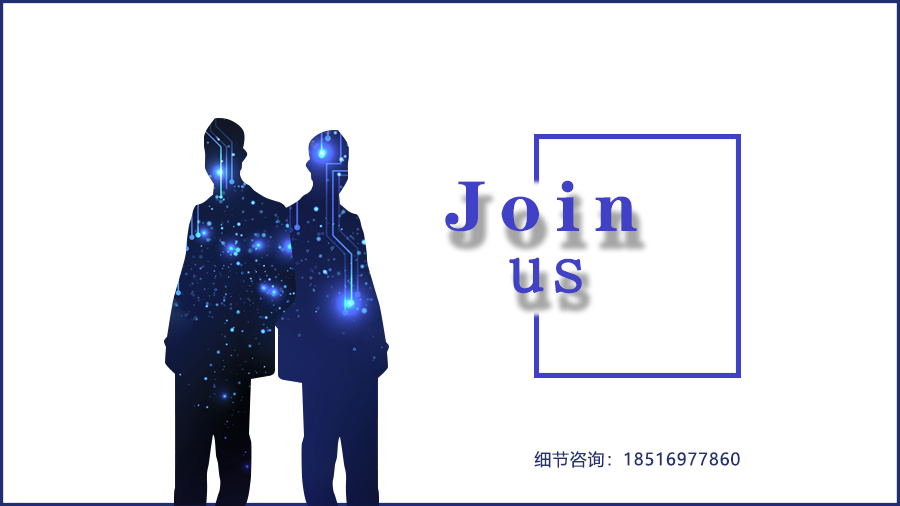
<style>
.page{position:relative;width:900px;height:506px;background:#ffffff}
.page>*{position:absolute;margin:0}
.t1{font:72px "FZCHYJW--GB1-0";letter-spacing:0.2em;color:#4141c8}
.t2{font:72px "SimSun-ExtB";letter-spacing:0.05em;color:#4141c8;font-weight:bold}
.t3{font:16.9px "MicrosoftYaHei";letter-spacing:0.05em;color:#243175}
</style>
<div class="page">
<p class="t1" style="left:445px;top:180px;width:192px;height:52px">Join</p>
<p class="t2" style="left:509px;top:257px;width:73px;height:37px">us</p>
<p class="t3" style="left:534px;top:451px;width:206px;height:17px">细节咨询：18516977860</p>
</div>
